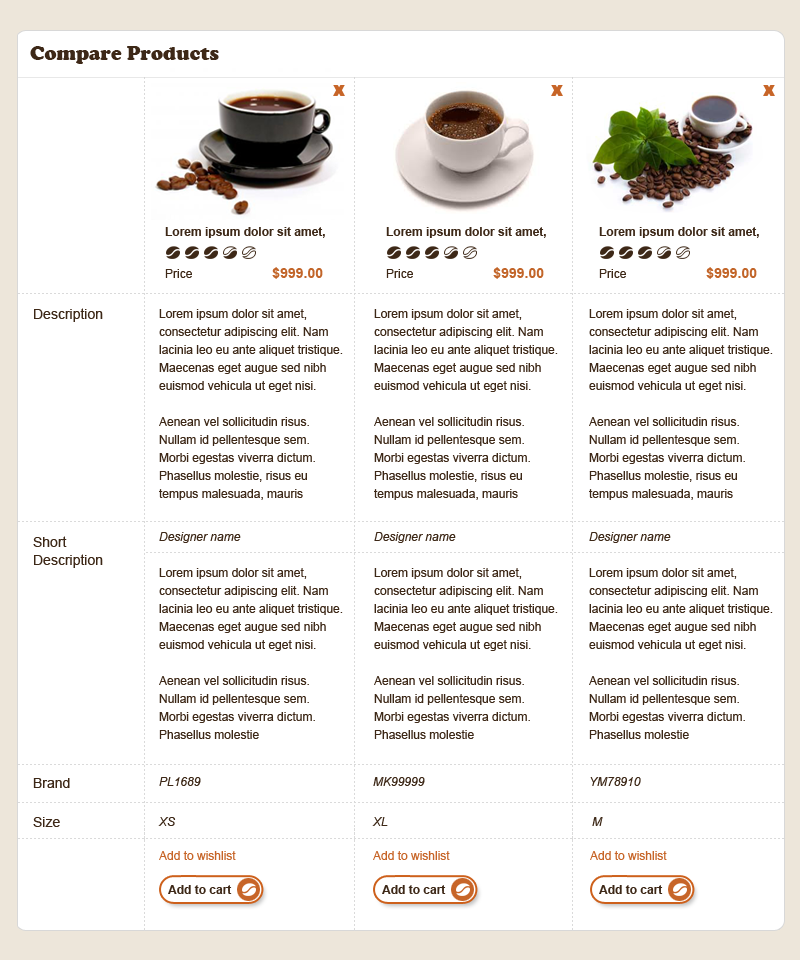
<style>
.page{position:relative;width:800px;height:960px;background:#ffffff}
.page>*{position:absolute;margin:0}
.t1{font:20px "CooperBlack";color:#3d2817}
.t2{font:12px/18px "Arial-BoldMT";color:#3d2817}
.t3{font:12px/42px "ArialMT";color:#3d2817}
.t4{font:14px/42px "Arial-BoldMT";color:#c26529}
.t5{font:14px "ArialMT";color:#3d2817}
.t6{font:12px/18px "ArialMT";color:#3d2817}
.t7{font:12px/18px "Arial-ItalicMT";color:#3d2817}
.t8{font:14px/18px "ArialMT";color:#3d2817}
.t9{font:12px "Arial-ItalicMT";color:#3d2817}
.t10{font:12px "ArialMT";color:#c76528}
.t11{font:12px "Arial-BoldMT";color:#3d2817}
</style>
<div class="page">
<p class="t1" style="left:30px;top:46px;width:189px;height:18px">Compare Products</p>
<p class="t2" style="left:165px;top:227px;width:160px;height:52px">Lorem ipsum dolor sit amet,<br><span class="t3">Price                        </span><span class="t4">$999.00</span></p>
<p class="t2" style="left:386px;top:227px;width:160px;height:52px">Lorem ipsum dolor sit amet,<br><span class="t3">Price                        </span><span class="t4">$999.00</span></p>
<p class="t2" style="left:599px;top:227px;width:160px;height:52px">Lorem ipsum dolor sit amet,<br><span class="t3">Price                        </span><span class="t4">$999.00</span></p>
<p class="t5" style="left:34px;top:308px;width:69px;height:14px">Description</p>
<p class="t6" style="left:159px;top:309px;width:184px;height:191px">Lorem ipsum dolor sit amet, <br>consectetur adipiscing elit. Nam <br>lacinia leo eu ante aliquet tristique. <br>Maecenas eget augue sed nibh <br>euismod vehicula ut eget nisi. <br><br>Aenean vel sollicitudin risus. <br>Nullam id pellentesque sem. <br>Morbi egestas viverra dictum. <br>Phasellus molestie, risus eu <br>tempus malesuada, mauris</p>
<p class="t6" style="left:374px;top:309px;width:184px;height:191px">Lorem ipsum dolor sit amet, <br>consectetur adipiscing elit. Nam <br>lacinia leo eu ante aliquet tristique. <br>Maecenas eget augue sed nibh <br>euismod vehicula ut eget nisi. <br><br>Aenean vel sollicitudin risus. <br>Nullam id pellentesque sem. <br>Morbi egestas viverra dictum. <br>Phasellus molestie, risus eu <br>tempus malesuada, mauris</p>
<p class="t6" style="left:589px;top:309px;width:184px;height:191px">Lorem ipsum dolor sit amet, <br>consectetur adipiscing elit. Nam <br>lacinia leo eu ante aliquet tristique. <br>Maecenas eget augue sed nibh <br>euismod vehicula ut eget nisi. <br><br>Aenean vel sollicitudin risus. <br>Nullam id pellentesque sem. <br>Morbi egestas viverra dictum. <br>Phasellus molestie, risus eu <br>tempus malesuada, mauris</p>
<p class="t6" style="left:159px;top:532px;width:184px;height:207px"><span class="t7">Designer name<br><br></span>Lorem ipsum dolor sit amet, <br>consectetur adipiscing elit. Nam <br>lacinia leo eu ante aliquet tristique. <br>Maecenas eget augue sed nibh <br>euismod vehicula ut eget nisi. <br><br>Aenean vel sollicitudin risus. <br>Nullam id pellentesque sem. <br>Morbi egestas viverra dictum. <br>Phasellus molestie</p>
<p class="t6" style="left:374px;top:532px;width:184px;height:207px"><span class="t7">Designer name<br><br></span>Lorem ipsum dolor sit amet, <br>consectetur adipiscing elit. Nam <br>lacinia leo eu ante aliquet tristique. <br>Maecenas eget augue sed nibh <br>euismod vehicula ut eget nisi. <br><br>Aenean vel sollicitudin risus. <br>Nullam id pellentesque sem. <br>Morbi egestas viverra dictum. <br>Phasellus molestie</p>
<p class="t6" style="left:589px;top:532px;width:184px;height:207px"><span class="t7">Designer name<br><br></span>Lorem ipsum dolor sit amet, <br>consectetur adipiscing elit. Nam <br>lacinia leo eu ante aliquet tristique. <br>Maecenas eget augue sed nibh <br>euismod vehicula ut eget nisi. <br><br>Aenean vel sollicitudin risus. <br>Nullam id pellentesque sem. <br>Morbi egestas viverra dictum. <br>Phasellus molestie</p>
<p class="t8" style="left:33px;top:536px;width:70px;height:32px">Short <br>Description</p>
<p class="t5" style="left:33px;top:778px;width:37px;height:10px">Brand</p>
<p class="t9" style="left:159px;top:777px;width:42px;height:9px">PL1689</p>
<p class="t9" style="left:373px;top:777px;width:52px;height:9px">MK99999</p>
<p class="t9" style="left:590px;top:777px;width:51px;height:9px">YM78910</p>
<p class="t5" style="left:33px;top:817px;width:27px;height:10px">Size</p>
<p class="t9" style="left:158px;top:817px;width:18px;height:9px">XS</p>
<p class="t9" style="left:372px;top:817px;width:16px;height:9px">XL</p>
<p class="t9" style="left:592px;top:817px;width:11px;height:9px">M</p>
<p class="t10" style="left:159px;top:851px;width:77px;height:9px">Add to wishlist</p>
<p class="t10" style="left:373px;top:851px;width:77px;height:9px">Add to wishlist</p>
<p class="t10" style="left:590px;top:851px;width:77px;height:9px">Add to wishlist</p>
<p class="t11" style="left:168px;top:885px;width:64px;height:9px">Add to cart</p>
<p class="t11" style="left:382px;top:885px;width:64px;height:9px">Add to cart</p>
<p class="t11" style="left:599px;top:885px;width:64px;height:9px">Add to cart</p>
</div>
